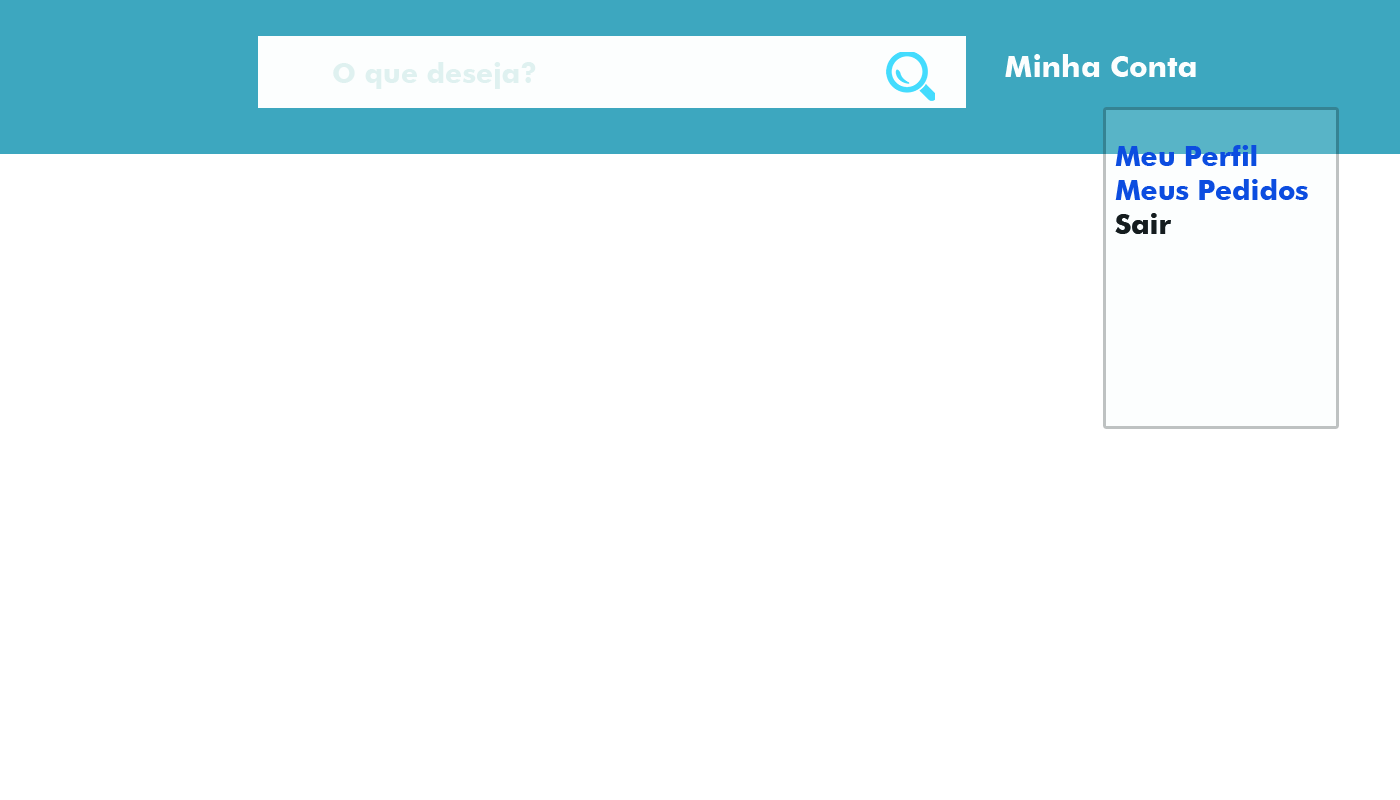
<style>
.page{position:relative;width:1400px;height:800px;background:#ffffff}
.page>*{position:absolute;margin:0}
.t1{font:30px "FuturaBT-Bold";color:#fcfefe}
.t2{font:28px "FuturaBT-Bold";color:#dff1f0}
.t3{font:28px "FuturaBT-Bold";color:#0b4de0}
.t4{font:30px "FuturaBT-Bold";color:#70b2ff}
.t5{font:28px "FuturaBT-Bold";color:#151c1f}
</style>
<div class="page">
<p class="t1" style="left:1005px;top:54px;width:191px;height:23px">Minha Conta</p>
<p class="t2" style="left:333px;top:62px;width:203px;height:27px">O que deseja?</p>
<p class="t3" style="left:1115px;top:145px;width:193px;height:89px"><span class="t4"><br> </span>Meu Perfil<br> Meus Pedidos<br> <span class="t5">Sair</span></p>
</div>
